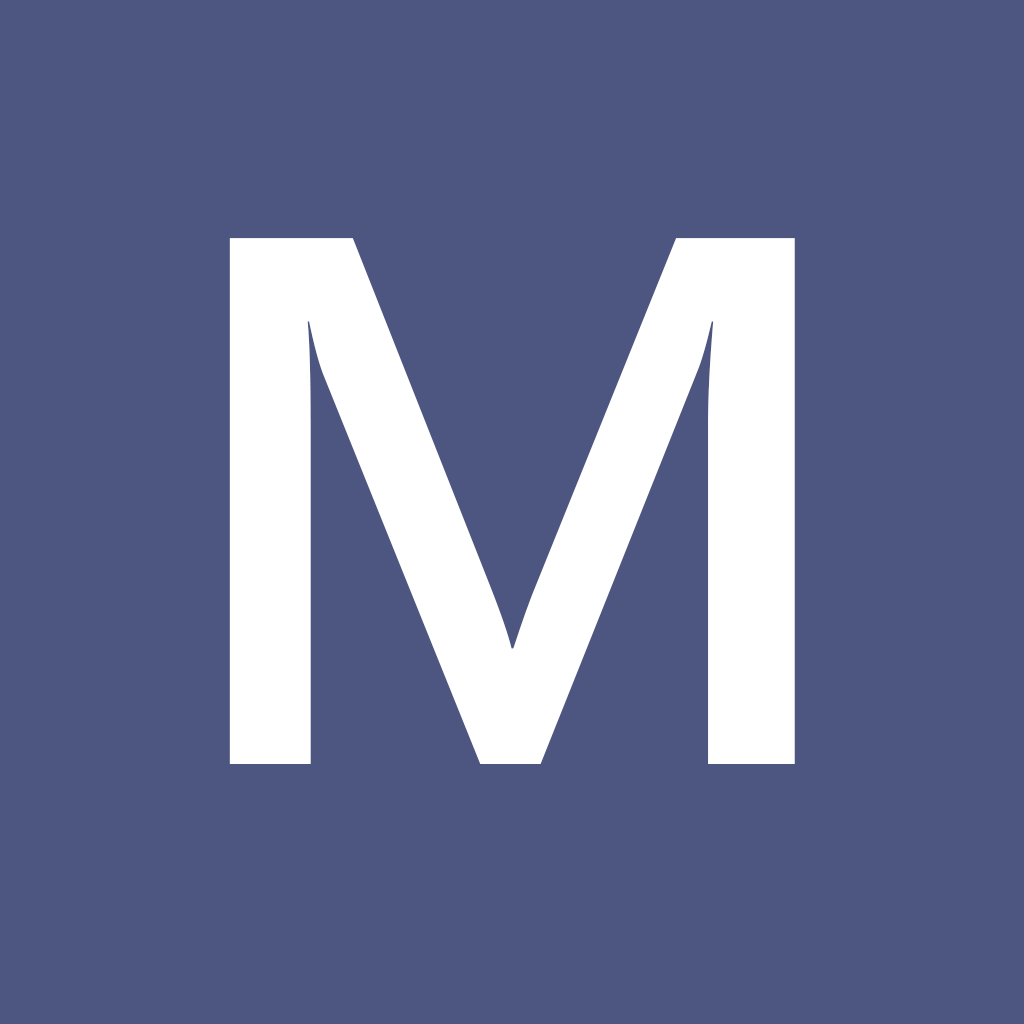
<style>
.page{position:relative;width:1024px;height:1024px;background:#4d5581}
.page>*{position:absolute;margin:0}
.t1{font:750.8px "SegoeUI-Semibold";letter-spacing:0.004em;color:#ffffff}
</style>
<div class="page">
<p class="t1" style="left:229px;top:238px;width:566px;height:526px">M</p>
</div>
